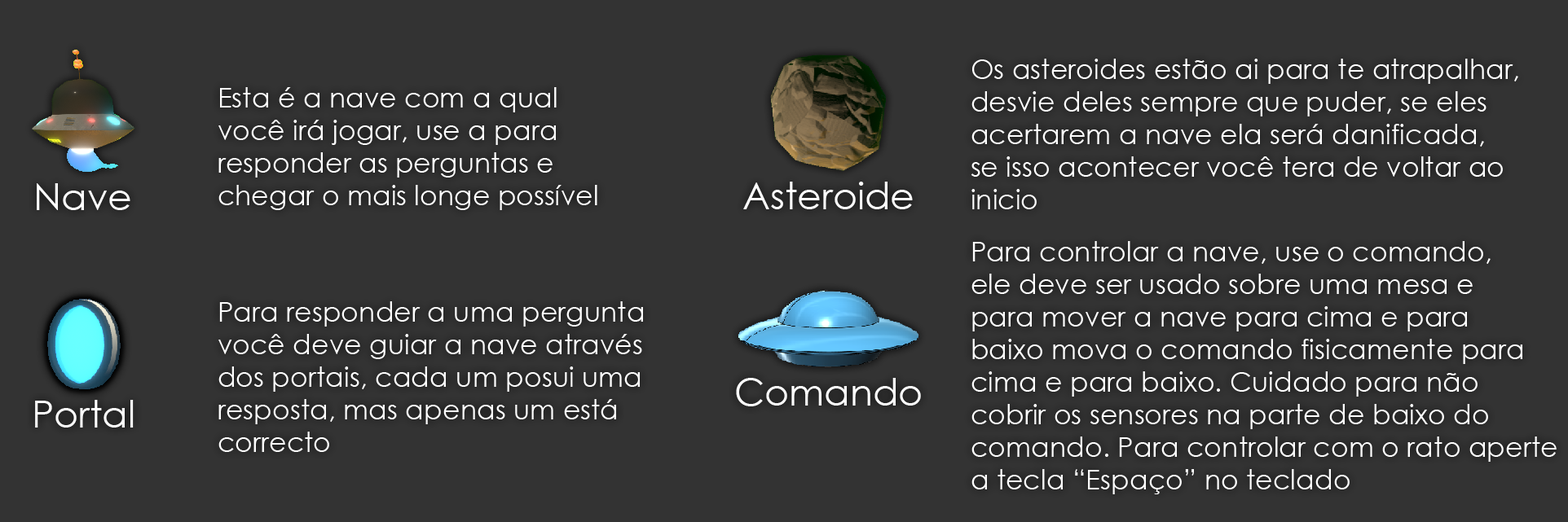
<style>
.page{position:relative;width:1568px;height:522px;background:#333333}
.page>*{position:absolute;margin:0}
.t1{font:27.2px "CenturyGothic";color:#ffffff}
.t2{font:37.4px "CenturyGothic";color:#ffffff}
</style>
<div class="page">
<p class="t1" style="left:971px;top:59px;width:547px;height:150px">Os asteroides estão ai para te atrapalhar,<br>desvie deles sempre que puder, se eles<br>acertarem a nave ela será danificada,<br>se isso acontecer você tera de voltar ao<br>inicio</p>
<p class="t1" style="left:218px;top:87px;width:379px;height:123px">Esta é a nave com a qual<br>você irá jogar, use a para<br>responder as perguntas e<br>chegar o mais longe possível</p>
<p class="t2" style="left:37px;top:183px;width:93px;height:27px">Nave</p>
<p class="t2" style="left:743px;top:182px;width:170px;height:27px">Asteroide</p>
<p class="t1" style="left:971px;top:241px;width:586px;height:254px">Para controlar a nave, use o comando,<br>ele deve ser usado sobre uma mesa e<br>para mover a nave para cima e para <br>baixo mova o comando fisicamente para<br>cima e para baixo. Cuidado para não<br>cobrir os sensores na parte de baixo do <br>comando. Para controlar com o rato aperte<br>a tecla “Espaço” no teclado</p>
<p class="t1" style="left:218px;top:302px;width:425px;height:150px">Para responder a uma pergunta<br>você deve guiar a nave através<br>dos portais, cada um posui uma <br>resposta, mas apenas um está <br>correcto</p>
<p class="t2" style="left:736px;top:378px;width:185px;height:29px">Comando</p>
<p class="t2" style="left:35px;top:400px;width:99px;height:28px">Portal</p>
</div>
